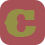
<style>
.page{position:relative;width:45px;height:45px;background:#a75157}
.page>*{position:absolute;margin:0}
.t1{font:50px "Saddlebag-Black";color:#949146}
</style>
<div class="page">
<p class="t1" style="left:3px;top:9px;width:33px;height:28px">C</p>
</div>
